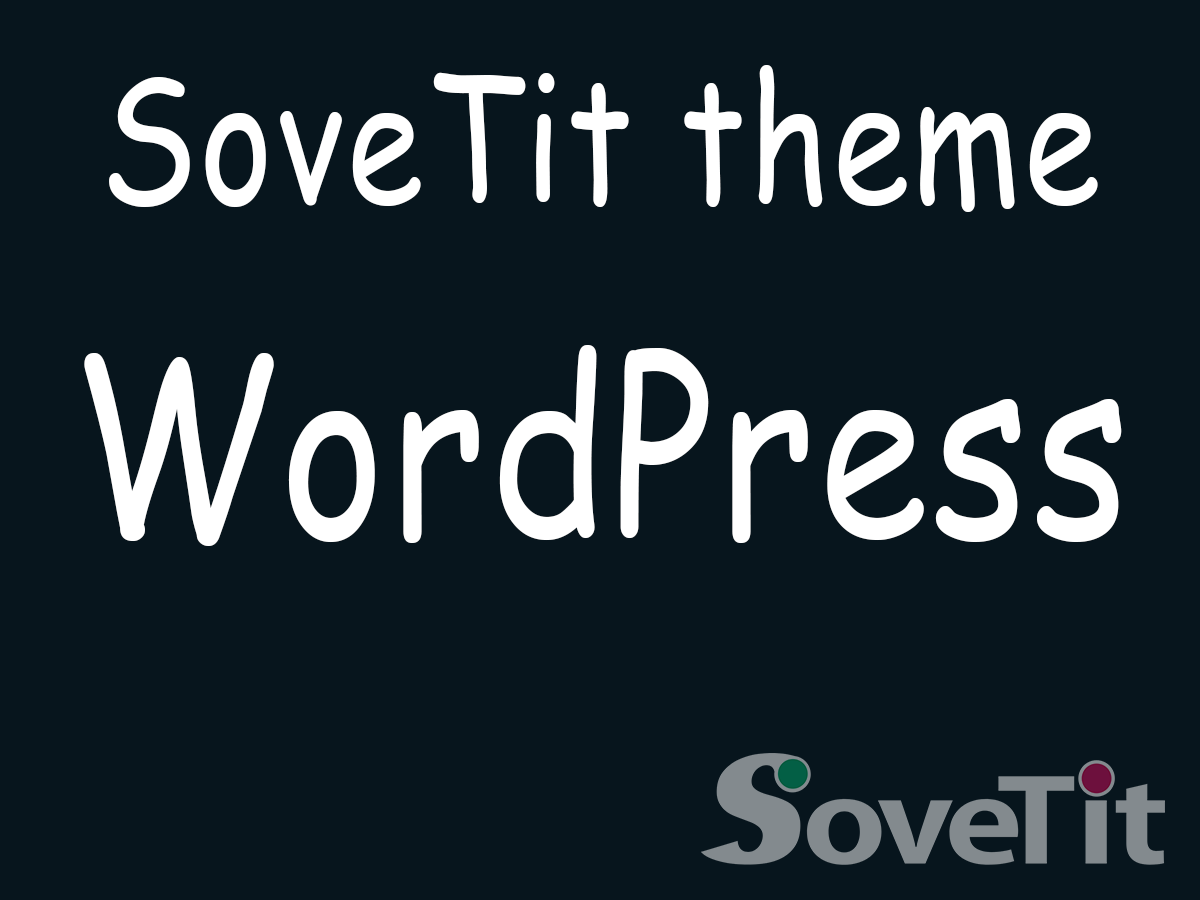
<style>
.page{position:relative;width:1200px;height:900px;background:#07151d}
.page>*{position:absolute;margin:0}
.t1{font:175.4px "ComicSansMS";letter-spacing:0.025em;color:#ffffff;scale:0.79 1}
.t2{font:244.2px "ComicSansMS";letter-spacing:0.025em;color:#ffffff;scale:0.81 1}
</style>
<div class="page">
<p class="t1" style="left:109px;top:65px;width:989px;height:147px">SoveTit theme</p>
<p class="t2" style="left:84px;top:345px;width:1038px;height:201px">WordPress</p>
</div>
